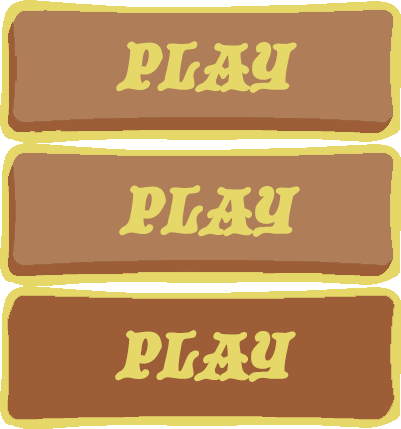
<style>
.page{position:relative;width:401px;height:429px;background:#af7d58}
.page>*{position:absolute;margin:0}
.t1{font:65px "BlackCastleMF";color:#e6d769;font-weight:bold;font-style:italic}
</style>
<div class="page">
<p class="t1" style="left:119px;top:185px;width:181px;height:52px">PLAY</p>
<p class="t1" style="left:115px;top:330px;width:181px;height:52px">PLAY</p>
</div>
